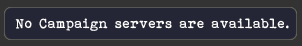
<style>
.page{position:relative;width:302px;height:46px;background:#252635}
.page>*{position:absolute;margin:0}
.t1{font:13.9px "Bohemian-typewriter";color:#ffffff}
</style>
<div class="page">
<p class="t1" style="left:15px;top:18px;width:274px;height:13px">No Campaign servers are available.</p>
</div>
